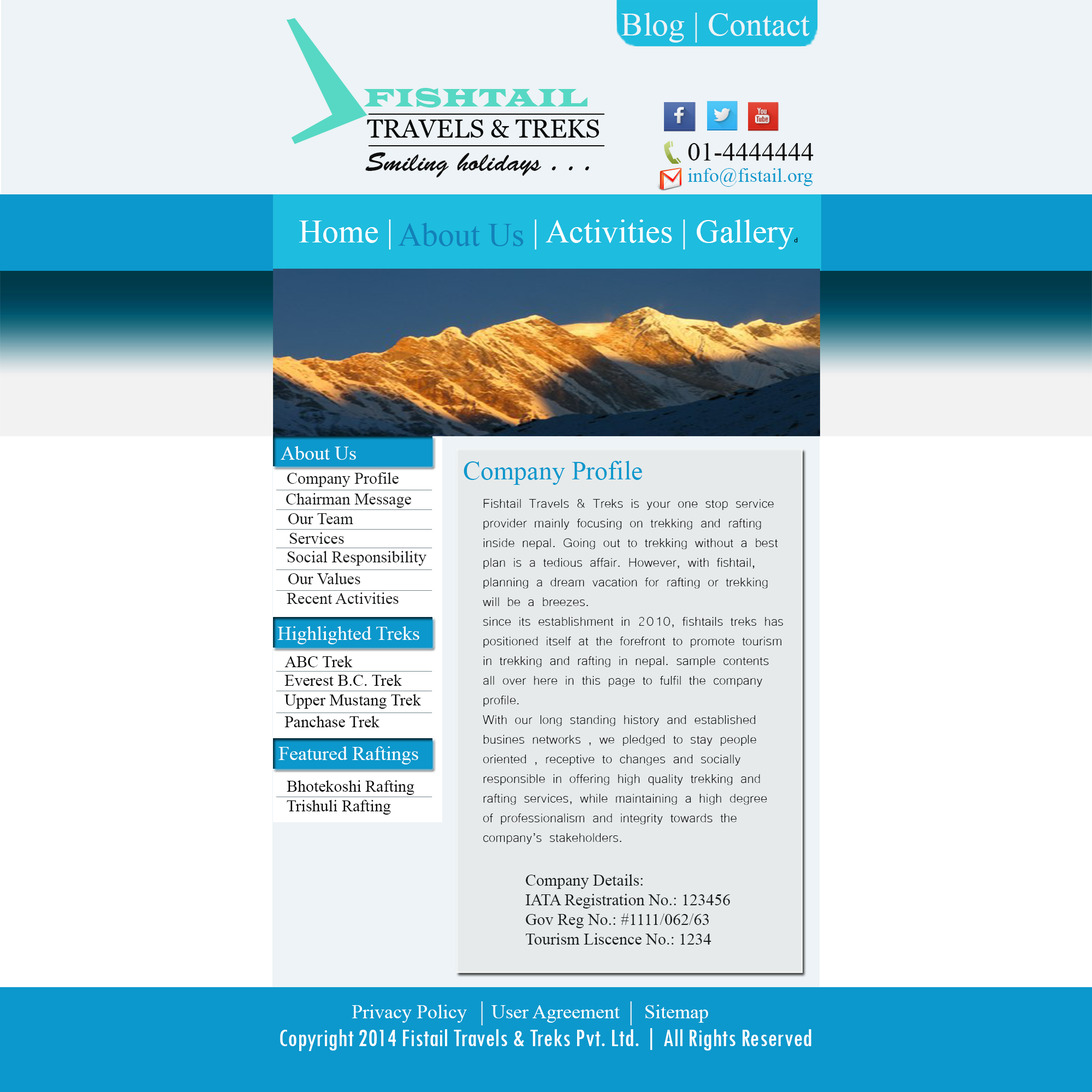
<style>
.page{position:relative;width:1092px;height:1092px;background:#ffffff}
.page>*{position:absolute;margin:0}
.t1{font:32.8px "TimesNewRomanPSMT";color:#edf3f6}
.t2{font:26.3px "LatinWide";color:#56d8c4;scale:0.88 1}
.t3{font:26.2px "Vani";color:#070a0a}
.t4{font:26.2px "TimesNewRomanPSMT";color:#0f0e0e}
.t5{font:26.2px "BrushScriptStd";color:#0f0e0e}
.t6{font:19.7px "TimesNewRomanPSMT";color:#0c98cc}
.t7{font:32.8px "TimesNewRomanPSMT";color:#ffffff}
.t8{font:6.6px "MyriadPro-Regular";color:#000000}
.t9{font:32.8px "TimesNewRomanPSMT";color:#1380b8}
.t10{font:19.7px "TimesNewRomanPSMT";color:#ffffff}
.t11{font:26.2px "TimesNewRomanPSMT";color:#0c98cc}
.t12{font:16.4px "TimesNewRomanPSMT";color:#181a1b}
.t13{font:16.4px "TimesNewRomanPSMT";color:#73848b}
.t14{font:16.4px "Microsoft-Yi-Baiti";color:#080808}
.t15{font:16.4px "TimesNewRomanPSMT";color:#080808}
.t16{font:16.4px "TimesNewRomanPSMT";color:#191b1c}
.t17{font:26.2px "TwCenMT-Condensed";color:#ffffff}
</style>
<div class="page">
<p class="t1" style="left:621px;top:13px;width:189px;height:30px">Blog | Contact</p>
<p class="t2" style="left:364px;top:88px;width:223px;height:20px">FISHTAIL</p>
<p class="t3" style="left:368px;top:114px;width:236px;height:32px">______________<br>______________</p>
<p class="t3" style="left:367px;top:120px;width:232px;height:18px">TRAVELS &amp; TREKS</p>
<p class="t4" style="left:688px;top:143px;width:126px;height:18px">01-4444444</p>
<p class="t5" style="left:365px;top:152px;width:224px;height:25px">Smiling holidays . . .</p>
<p class="t6" style="left:688px;top:168px;width:125px;height:19px">info@fistail.org</p>
<p class="t7" style="left:299px;top:219px;width:499px;height:31px">Home |                 | Activities | Gallery<span class="t8">d</span></p>
<p class="t9" style="left:398px;top:223px;width:126px;height:23px">About Us</p>
<p class="t10" style="left:281px;top:446px;width:75px;height:14px">About Us</p>
<p class="t11" style="left:464px;top:461px;width:178px;height:24px">Company Profile</p>
<p class="t12" style="left:287px;top:472px;width:112px;height:15px">Company Profile</p>
<p class="t13" style="left:276px;top:490px;width:156px;height:0px">___________________</p>
<p class="t12" style="left:286px;top:493px;width:125px;height:15px">Chairman Message</p>
<p class="t13" style="left:276px;top:509px;width:156px;height:1px">___________________</p>
<p class="t14" style="left:483px;top:499px;width:300px;height:345px">Fishtail Travels &amp; Treks is your one stop service<br>provider mainly focusing on trekking and rafting<br>inside nepal. Going out to trekking without a best <br>plan is a tedious affair. However, with fishtail,<br>planning a dream vacation for rafting or trekking<br>will be a breezes.<br>since its establishment in 2010, fishtails treks has<br>positioned itself at the forefront to promote tourism<br>in trekking and rafting in nepal. sample contents <br>all over here in this page to fulfil the company<br>profile.<br>With our long standing history and established<br>busines networks , we pledged to stay people<br>oriented , receptive to changes and socially<br>responsible in offering high quality trekking and<br>rafting services, while maintaining a high degree <br>of professionalism and integrity towards the<br>company’s stakeholders.</p>
<p class="t12" style="left:288px;top:513px;width:65px;height:11px">Our Team</p>
<p class="t13" style="left:276px;top:529px;width:156px;height:1px">___________________</p>
<p class="t12" style="left:289px;top:532px;width:55px;height:12px">Services</p>
<p class="t13" style="left:276px;top:548px;width:156px;height:0px">___________________</p>
<p class="t12" style="left:287px;top:551px;width:139px;height:15px">Social Responsibility</p>
<p class="t13" style="left:276px;top:569px;width:156px;height:1px">___________________</p>
<p class="t12" style="left:288px;top:573px;width:72px;height:11px">Our Values</p>
<p class="t13" style="left:276px;top:590px;width:156px;height:1px">___________________</p>
<p class="t12" style="left:287px;top:592px;width:112px;height:12px">Recent Activities</p>
<p class="t10" style="left:277px;top:626px;width:142px;height:18px">Highlighted Treks</p>
<p class="t15" style="left:284px;top:656px;width:69px;height:11px">ABC Trek</p>
<p class="t13" style="left:276px;top:671px;width:156px;height:1px">___________________</p>
<p class="t15" style="left:284px;top:674px;width:118px;height:12px">Everest B.C. Trek</p>
<p class="t13" style="left:276px;top:691px;width:156px;height:0px">___________________</p>
<p class="t15" style="left:284px;top:694px;width:137px;height:15px">Upper Mustang Trek</p>
<p class="t13" style="left:276px;top:713px;width:156px;height:0px">___________________</p>
<p class="t15" style="left:284px;top:716px;width:95px;height:11px">Panchase Trek</p>
<p class="t10" style="left:278px;top:746px;width:140px;height:18px">Featured Raftings</p>
<p class="t15" style="left:287px;top:780px;width:127px;height:15px">Bhotekoshi Rafting</p>
<p class="t13" style="left:276px;top:797px;width:156px;height:0px">___________________</p>
<p class="t15" style="left:287px;top:800px;width:104px;height:15px">Trishuli Rafting</p>
<p class="t16" style="left:525px;top:874px;width:205px;height:71px">Company Details:<br>IATA Registration No.: 123456<br>Gov Reg No.: #1111/062/63<br>Tourism Liscence No.: 1234</p>
<p class="t10" style="left:352px;top:1005px;width:356px;height:18px">Privacy Policy     User Agreement     Sitemap</p>
<p class="t17" style="left:280px;top:1028px;width:531px;height:23px">Copyright 2014 Fistail Travels &amp; Treks Pvt. Ltd. | All Rights Reserved</p>
</div>
